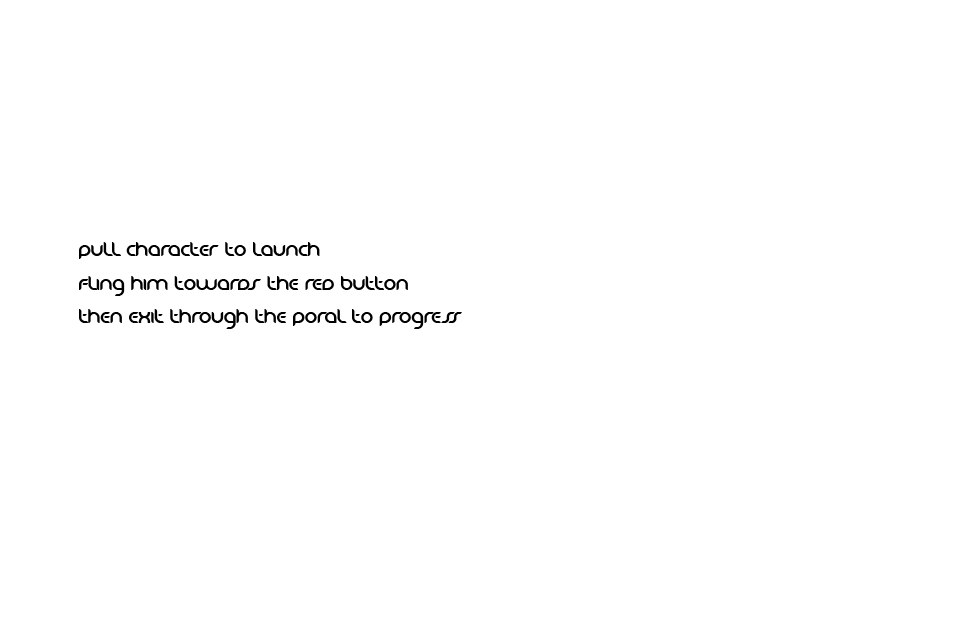
<style>
.page{position:relative;width:960px;height:640px;background:#ffffff}
.page>*{position:absolute;margin:0}
.t1{font:14px "Danube";color:#000000}
</style>
<div class="page">
<p class="t1" style="left:79px;top:242px;width:383px;height:87px;text-align:justify">pull character to launch  <br><br>fling him towards the red button<br><br>then exit through the poral to progress</p>
</div>
